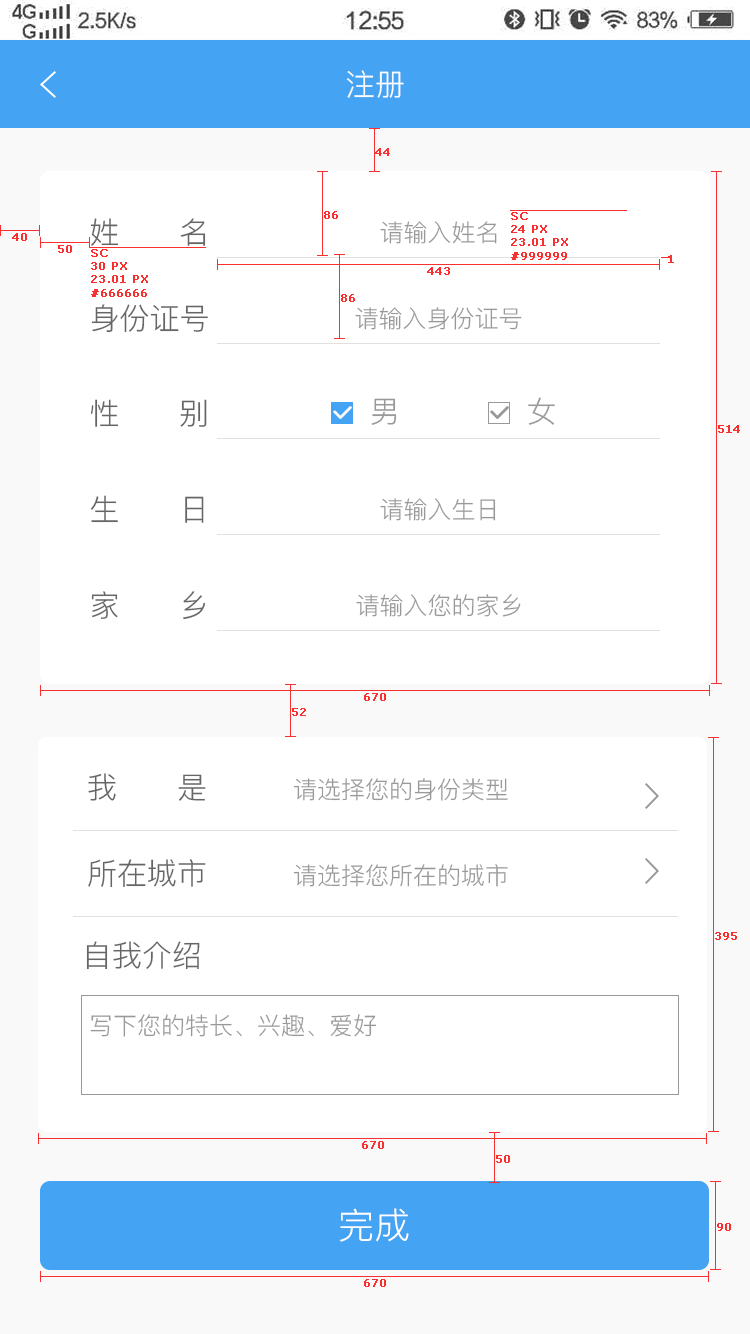
<style>
.page{position:relative;width:750px;height:1334px;background:#ffffff}
.page>*{position:absolute;margin:0}
.t1{font:30px "PingFang-SC-Regular";color:#ffffff;text-transform:uppercase}
.t2{font:11px "Verdana";color:#f83030;font-weight:bold}
.t3{font:30px "PingFang-SC-Regular";color:#666666;text-transform:uppercase}
.t4{font:24px "PingFang-SC-Regular";color:#999999;text-transform:uppercase}
.t5{font:30px "PingFang-SC-Regular";color:#999999;text-transform:uppercase}
.t6{font:36px "PingFang-SC-Regular";color:#ffffff;text-transform:uppercase}
</style>
<div class="page">
<p class="t1" style="left:346px;top:70px;width:58px;height:28px">注册</p>
<p class="t2" style="left:375px;top:148px;width:15px;height:8px">44</p>
<p class="t3" style="left:90px;top:218px;width:116px;height:28px">姓      名</p>
<p class="t2" style="left:324px;top:211px;width:14px;height:8px">86</p>
<p class="t4" style="left:380px;top:221px;width:117px;height:23px">请输入姓名</p>
<p class="t2" style="left:511px;top:212px;width:57px;height:48px">SC<br>24 PX<br>23.01 PX<br>#999999</p>
<p class="t2" style="left:12px;top:233px;width:15px;height:8px">40</p>
<p class="t2" style="left:58px;top:245px;width:14px;height:8px">50</p>
<p class="t2" style="left:91px;top:249px;width:57px;height:48px">SC<br>30 PX<br>23.01 PX<br>#666666</p>
<p class="t2" style="left:668px;top:255px;width:6px;height:8px">1</p>
<p class="t2" style="left:427px;top:267px;width:23px;height:8px">443</p>
<p class="t2" style="left:341px;top:294px;width:14px;height:8px">86</p>
<p class="t3" style="left:91px;top:304px;width:117px;height:29px">身份证号</p>
<p class="t4" style="left:355px;top:307px;width:167px;height:23px">请输入身份证号</p>
<p class="t3" style="left:90px;top:399px;width:117px;height:28px">性      别</p>
<p class="t5" style="left:371px;top:398px;width:26px;height:27px">男</p>
<p class="t5" style="left:528px;top:397px;width:27px;height:28px">女</p>
<p class="t2" style="left:718px;top:425px;width:22px;height:8px">514</p>
<p class="t3" style="left:90px;top:495px;width:114px;height:28px">生      日</p>
<p class="t4" style="left:380px;top:498px;width:116px;height:23px">请输入生日</p>
<p class="t3" style="left:91px;top:591px;width:115px;height:29px">家      乡</p>
<p class="t4" style="left:356px;top:594px;width:165px;height:23px">请输入您的家乡</p>
<p class="t2" style="left:364px;top:693px;width:22px;height:8px">670</p>
<p class="t2" style="left:292px;top:708px;width:14px;height:8px">52</p>
<p class="t3" style="left:88px;top:773px;width:118px;height:28px">我      是</p>
<p class="t4" style="left:293px;top:778px;width:215px;height:23px">请选择您的身份类型</p>
<p class="t3" style="left:88px;top:859px;width:118px;height:29px">所在城市</p>
<p class="t4" style="left:293px;top:864px;width:215px;height:23px">请选择您所在的城市</p>
<p class="t3" style="left:86px;top:941px;width:114px;height:29px">自我介绍</p>
<p class="t2" style="left:715px;top:932px;width:22px;height:8px">395</p>
<p class="t4" style="left:90px;top:1014px;width:287px;height:23px">写下您的特长、兴趣、爱好</p>
<p class="t2" style="left:362px;top:1141px;width:22px;height:8px">670</p>
<p class="t2" style="left:496px;top:1155px;width:14px;height:8px">50</p>
<p class="t6" style="left:340px;top:1208px;width:69px;height:34px">完成</p>
<p class="t2" style="left:717px;top:1223px;width:14px;height:8px">90</p>
<p class="t2" style="left:364px;top:1279px;width:22px;height:8px">670</p>
</div>
